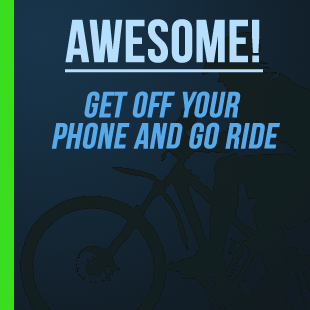
<style>
.page{position:relative;width:310px;height:310px}
.page>*{position:absolute;margin:0}
.t1{font:36px "BebasNeue";color:#55aaec;font-weight:bold;font-style:italic}
.t2{font:60px "BebasNeue";color:#b6dffe;font-weight:bold;text-decoration:underline}
</style>
<div class="page">
<p class="t1" style="left:51px;top:19px;width:229px;height:130px;text-align:center"><span class="t2">Awesome!<br></span>Get off Your <br>Phone and Go Ride</p>
</div>
